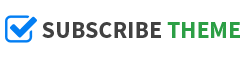
<style>
.page{position:relative;width:250px;height:60px;background:#ffffff}
.page>*{position:absolute;margin:0}
.t1{font:24px "SourceSansPro-Bold";color:#414141}
.t2{font:24px "SourceSansPro-Bold";color:#2c9f45}
</style>
<div class="page">
<p class="t1" style="left:42px;top:22px;width:198px;height:16px">SUBSCRIBE <span class="t2">THEME</span></p>
</div>
